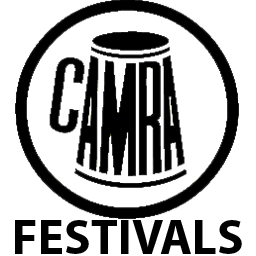
<style>
.page{position:relative;width:256px;height:256px;background:#ffffff}
.page>*{position:absolute;margin:0}
.t1{font:49px "MyriadPro-Bold";color:#000000}
</style>
<div class="page">
<p class="t1" style="left:15px;top:220px;width:227px;height:34px">FESTIVALS</p>
</div>
